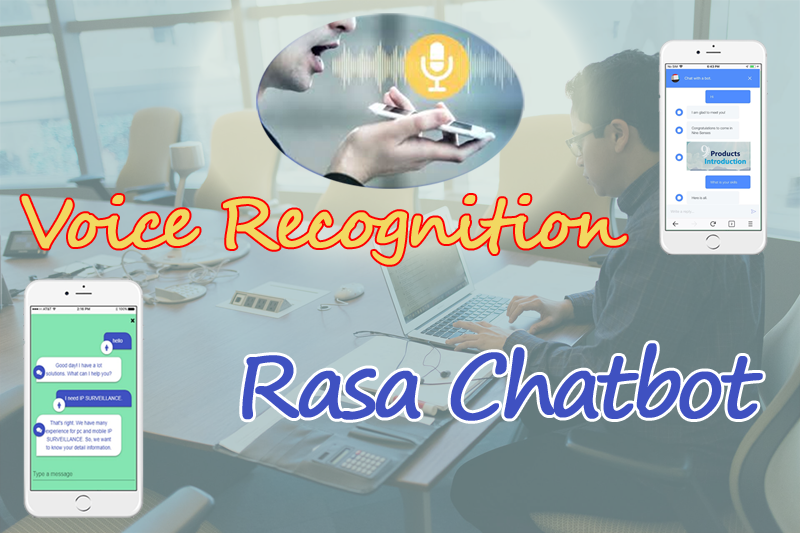
<style>
.page{position:relative;width:800px;height:533px}
.page>*{position:absolute;margin:0}
.t1{font:69px "SegoeScript";letter-spacing:-0.08em;color:#f2d861;font-weight:bold}
.t2{font:84.9px "SegoePrint";letter-spacing:-0.08em;color:#3f51c1;font-weight:bold}
</style>
<div class="page">
<p class="t1" style="left:21px;top:195px;width:606px;height:70px">Voice Recognition</p>
<p class="t2" style="left:242px;top:343px;width:521px;height:78px">Rasa Chatbot</p>
</div>
